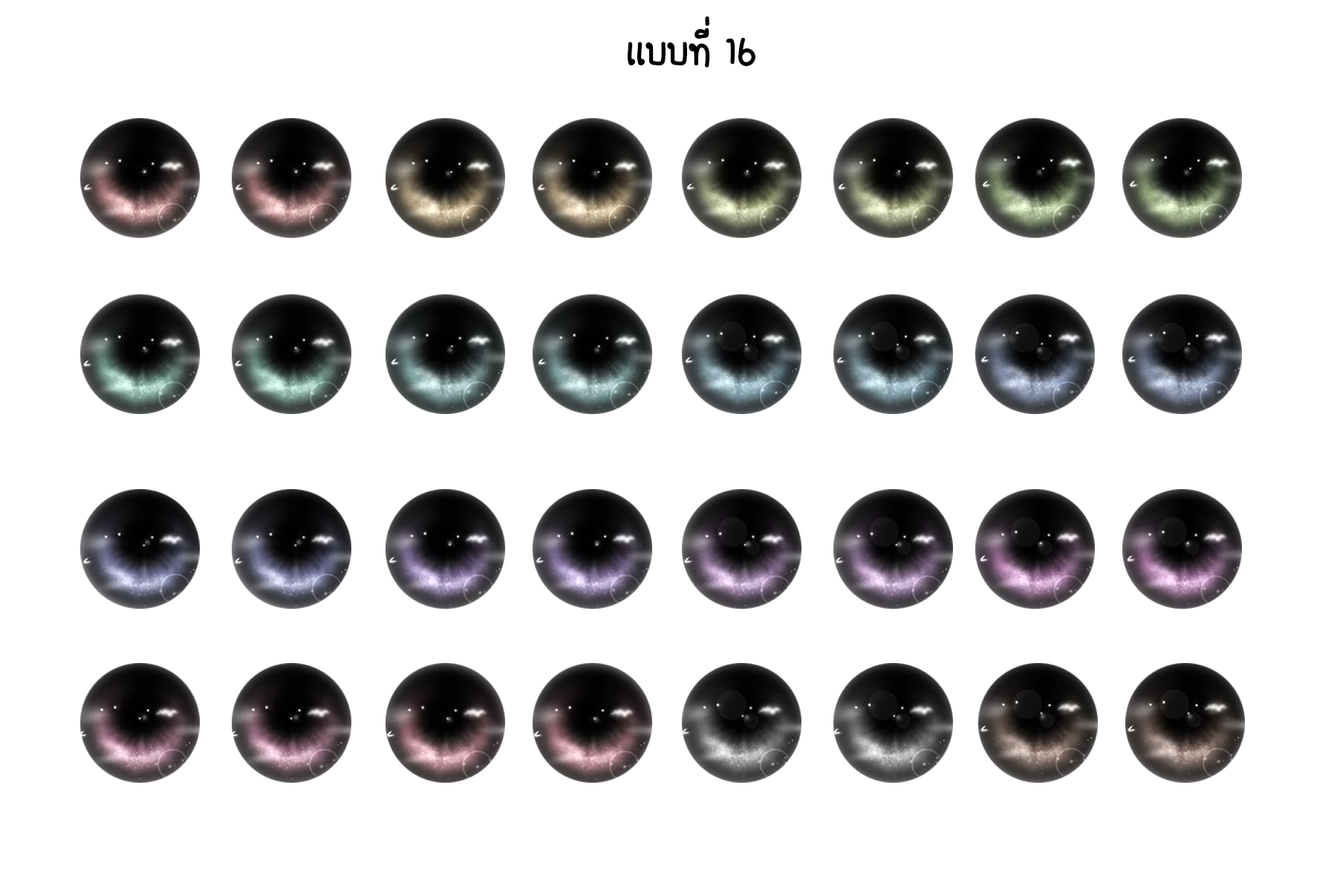
<style>
.page{position:relative;width:1337px;height:892px;background:#ffffff}
.page>*{position:absolute;margin:0}
.t1{font:55.7px "FCDaisyRegular";color:#000000}
</style>
<div class="page">
<p class="t1" style="left:627px;top:16px;width:129px;height:52px">เเบบที่ 16</p>
</div>
